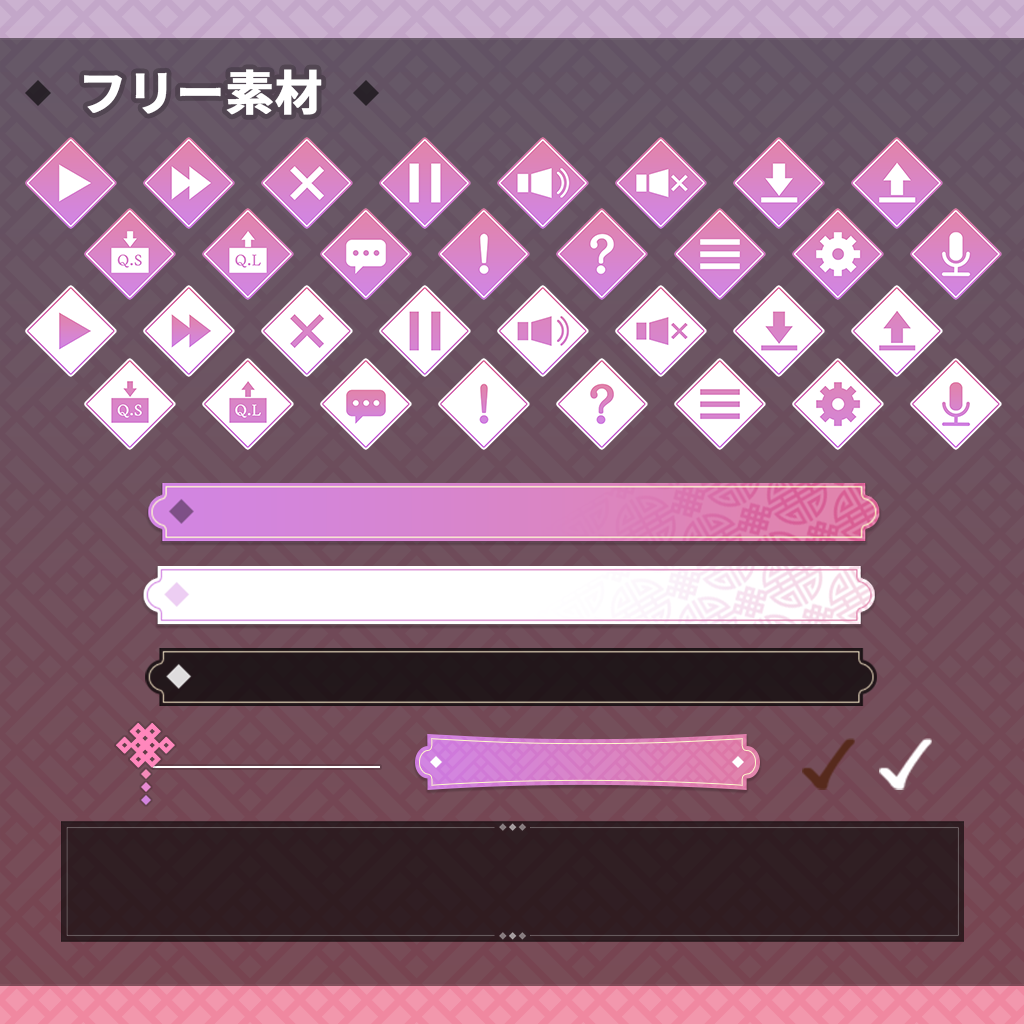
<style>
.page{position:relative;width:1024px;height:1024px}
.page>*{position:absolute;margin:0}
.t1{font:50px "KintoSans-Bold";color:#ffffff;font-weight:bold}
</style>
<div class="page">
<p class="t1" style="left:84px;top:69px;width:238px;height:46px">フリー素材</p>
</div>
